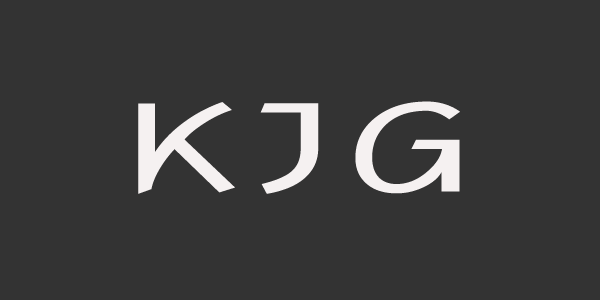
<style>
.page{position:relative;width:600px;height:300px;background:#333333}
.page>*{position:absolute;margin:0}
.t1{font:120px "H2porM";color:#f5f1f1;scale:1.66 1}
</style>
<div class="page">
<p class="t1" style="left:138px;top:101px;width:322px;height:93px">KJG</p>
</div>
